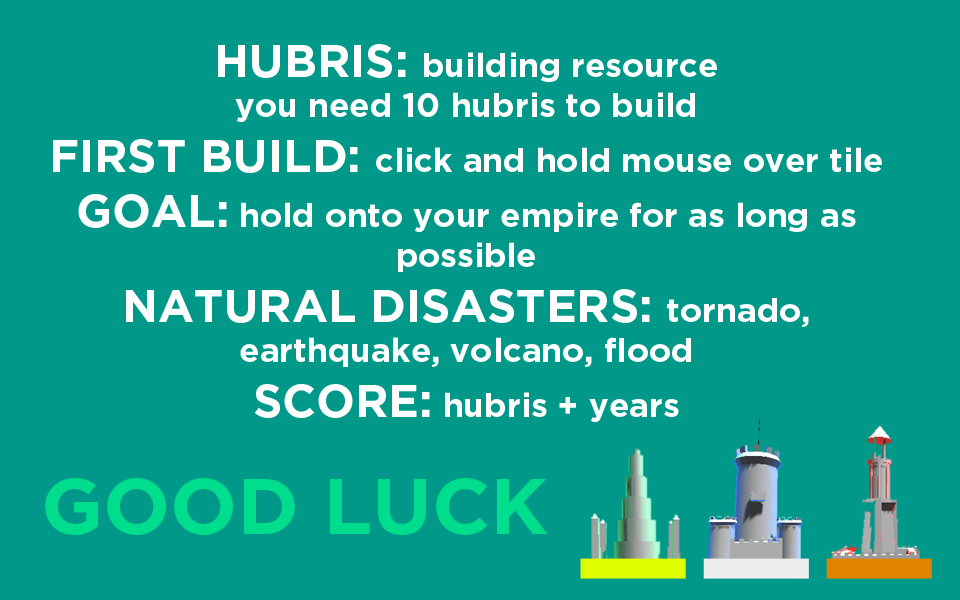
<style>
.page{position:relative;width:960px;height:600px;background:#009989}
.page>*{position:absolute;margin:0}
.t1{font:33.3px "Gotham-Bold";color:#ffffff}
.t2{font:45.8px "Gotham-Bold";color:#ffffff;text-transform:uppercase}
.t3{font:45.8px "Gotham-Bold";color:#ffffff}
.t4{font:79.2px "Gotham-Bold";color:#00de8d}
</style>
<div class="page">
<p class="t1" style="left:53px;top:44px;width:829px;height:378px;text-align:center"><span class="t2">Hubris: </span>building resource<br>you need 10 hubris to build<br><span class="t3">FIRST BUILD: </span>click and hold mouse over tile<br><span class="t3">GOAL:</span> hold onto your empire for as long as possible<br><span class="t3">NATURAL DISASTERS: </span>tornado, earthquake, volcano, flood<br><span class="t3">SCORE:</span> hubris + years</p>
<p class="t4" style="left:45px;top:478px;width:503px;height:57px">GOOD LUCK</p>
</div>
